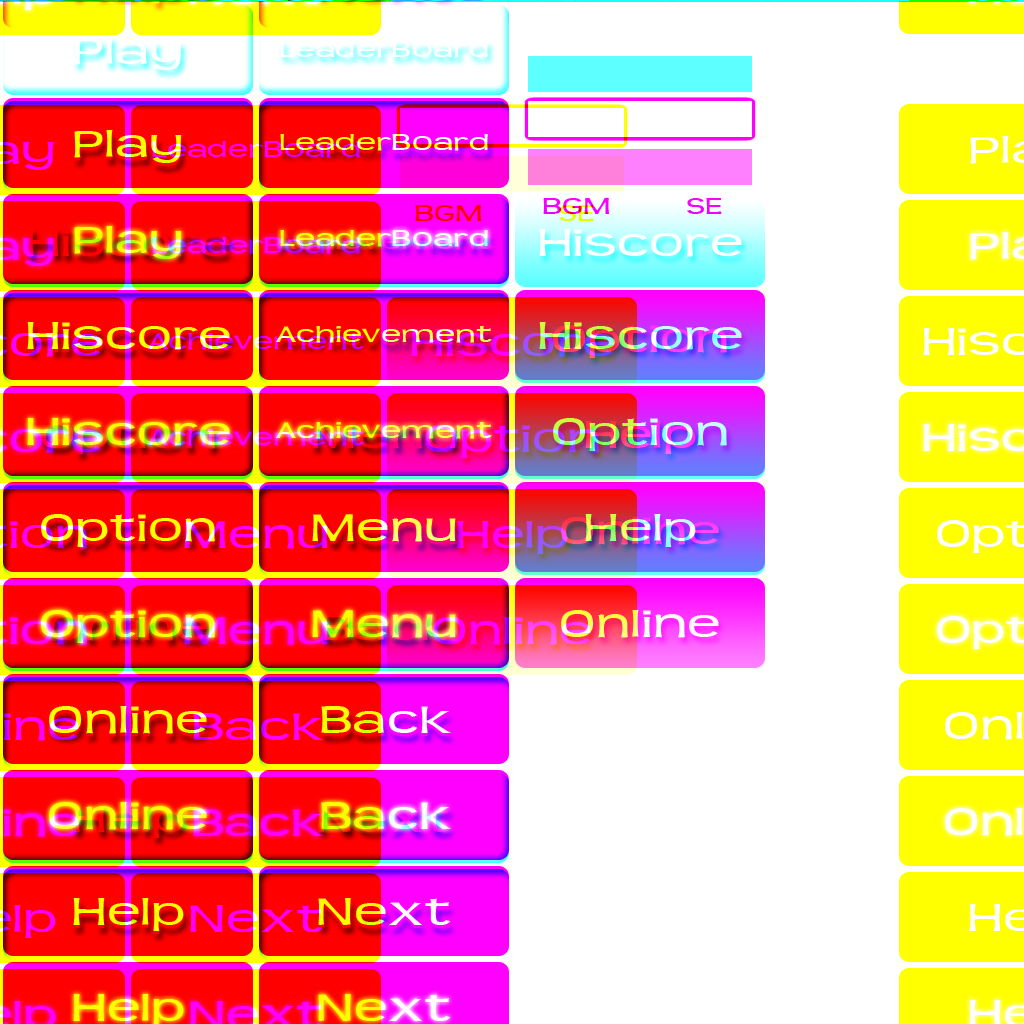
<style>
.page{position:relative;width:1024px;height:1024px;background:#ffffff}
.page>*{position:absolute;margin:0}
.t1{font:42px "Teen";scale:1.43 1}
.t2{font:25.2px "Teen";scale:1.43 1}
.t3{font:42px "Teen";color:#fefefe;scale:1.43 1}
.t4{font:42px "Teen";color:#fefe00;scale:1.43 1}
</style>
<div class="page">
<p class="t1" style="left:74px;top:131px;width:108px;height:33px">Play</p>
<p class="t2" style="left:280px;top:135px;width:208px;height:17px">LeaderBoard</p>
<p class="t3" style="left:539px;top:227px;width:203px;height:28px">Hiscore</p>
<p class="t1" style="left:27px;top:323px;width:203px;height:28px">Hiscore</p>
<p class="t2" style="left:276px;top:327px;width:216px;height:17px">Achievement</p>
<p class="t1" style="left:553px;top:323px;width:174px;height:33px">Option</p>
<p class="t1" style="left:41px;top:419px;width:174px;height:33px">Option</p>
<p class="t1" style="left:585px;top:419px;width:111px;height:33px">Help</p>
<p class="t1" style="left:41px;top:515px;width:174px;height:33px">Option</p>
<p class="t1" style="left:312px;top:515px;width:144px;height:28px">Menu</p>
<p class="t1" style="left:561px;top:515px;width:158px;height:28px">Online</p>
<p class="t1" style="left:49px;top:611px;width:158px;height:28px">Online</p>
<p class="t4" style="left:49px;top:707px;width:158px;height:28px">Online</p>
<p class="t1" style="left:321px;top:707px;width:130px;height:27px">Back</p>
<p class="t1" style="left:73px;top:803px;width:111px;height:33px">Help</p>
<p class="t4" style="left:73px;top:899px;width:111px;height:33px">Help</p>
<p class="t1" style="left:318px;top:899px;width:133px;height:28px">Next</p>
</div>
